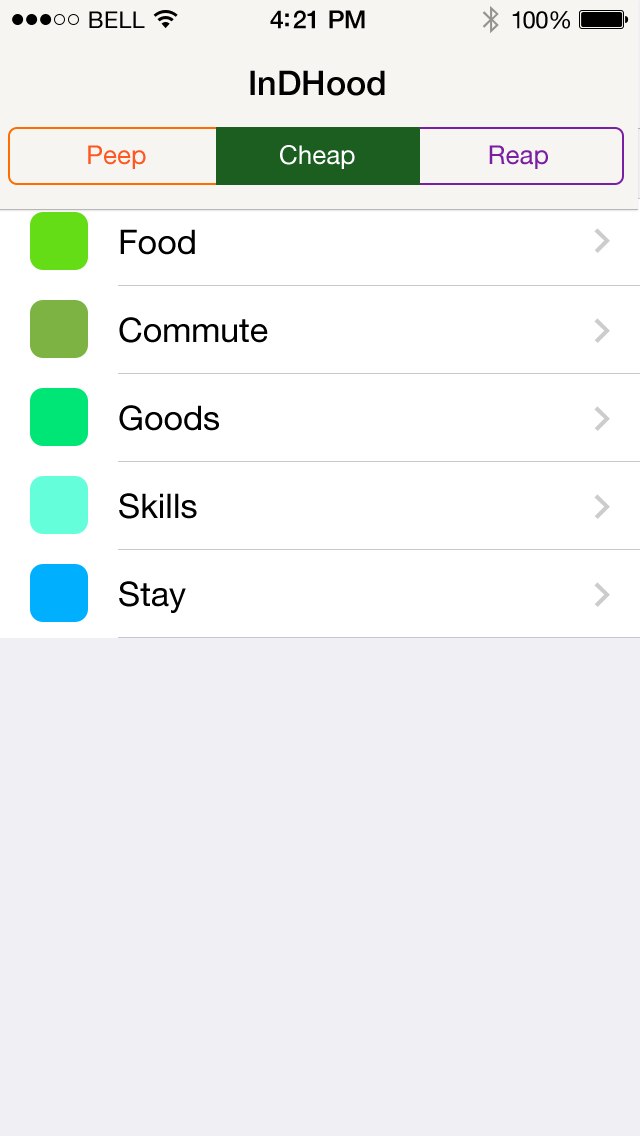
<style>
.page{position:relative;width:640px;height:1136px;background:#efeff4}
.page>*{position:absolute;margin:0}
.t1{font:23px "HelveticaNeue";letter-spacing:0.02em;color:#000000}
.t2{font:23px "HelveticaNeue";letter-spacing:0.02em}
.t3{font:25px "HelveticaNeue-Medium";letter-spacing:-0.02em;color:#000000}
.t4{font:25px "HelveticaNeue-Medium";letter-spacing:-0.02em}
.t5{font:24px "HelveticaNeue";letter-spacing:-0.02em;color:#010101}
.t6{font:24px "HelveticaNeue";letter-spacing:-0.02em}
.t7{font:34px "HelveticaNeue-Medium";color:#000000}
.t8{font:26px "HelveticaNeue";color:#ff5722}
.t9{font:26px "HelveticaNeue";color:#ffffff}
.t10{font:26px "HelveticaNeue";color:#7b1fa2}
.t11{font:34px/88px "HelveticaNeue";color:#000000}
</style>
<div class="page">
<p class="t1" style="left:89px;top:11px;width:56px;height:17px">BELL</p>
<p class="t2" style="left:90px;top:12px;width:56px;height:17px">BELL</p>
<p class="t3" style="left:270px;top:10px;width:95px;height:19px">4:21 PM</p>
<p class="t4" style="left:271px;top:11px;width:95px;height:19px">4:21 PM</p>
<p class="t5" style="left:512px;top:11px;width:58px;height:18px">100%</p>
<p class="t6" style="left:513px;top:12px;width:58px;height:18px">100%</p>
<p class="t7" style="left:250px;top:70px;width:135px;height:26px">InDHood</p>
<p class="t8" style="left:88px;top:145px;width:58px;height:24px">Peep</p>
<p class="t9" style="left:280px;top:145px;width:75px;height:24px">Cheap</p>
<p class="t10" style="left:489px;top:145px;width:59px;height:24px">Reap</p>
<p class="t11" style="left:119px;top:229px;width:149px;height:384px">Food<br>Commute<br>Goods<br>Skills<br>Stay</p>
</div>
